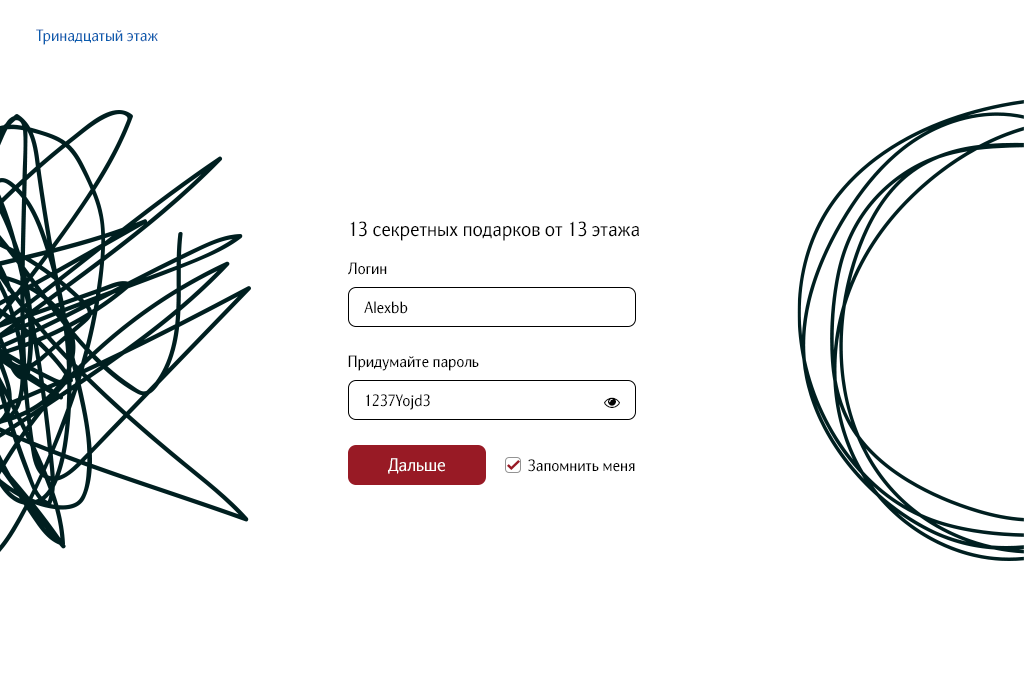
<style>
.page{position:relative;width:1024px;height:700px;background:#ffffff}
.page>*{position:absolute;margin:0}
.t1{font:16px "NatGrotesk-Regular";color:#0b5cae}
.t2{font:20px "NatGrotesk-Regular";color:#000000}
.t3{font:16px "NatGrotesk-Regular";color:#000000}
.t4{font:18px "NatGrotesk-Regular";color:#ffffff}
</style>
<div class="page">
<p class="t1" style="left:36px;top:29px;width:122px;height:16px">Тринадцатый этаж</p>
<p class="t2" style="left:350px;top:221px;width:289px;height:20px">13 секретных подарков от 13 этажа</p>
<p class="t3" style="left:348px;top:262px;width:39px;height:13px">Логин</p>
<p class="t3" style="left:364px;top:301px;width:44px;height:13px">Alexbb</p>
<p class="t3" style="left:348px;top:355px;width:131px;height:16px">Придумайте пароль</p>
<p class="t3" style="left:366px;top:394px;width:64px;height:16px">1237Yojd3</p>
<p class="t4" style="left:388px;top:458px;width:57px;height:16px">Дальше</p>
<p class="t3" style="left:528px;top:459px;width:107px;height:13px">Запомнить меня</p>
</div>
